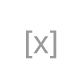
<style>
.page{position:relative;width:80px;height:80px;background:#ffffff}
.page>*{position:absolute;margin:0}
.t1{font:31.8px "DroidSans";color:#999999}
</style>
<div class="page">
<p class="t1" style="left:26px;top:30px;width:31px;height:29px">[x]</p>
</div>
